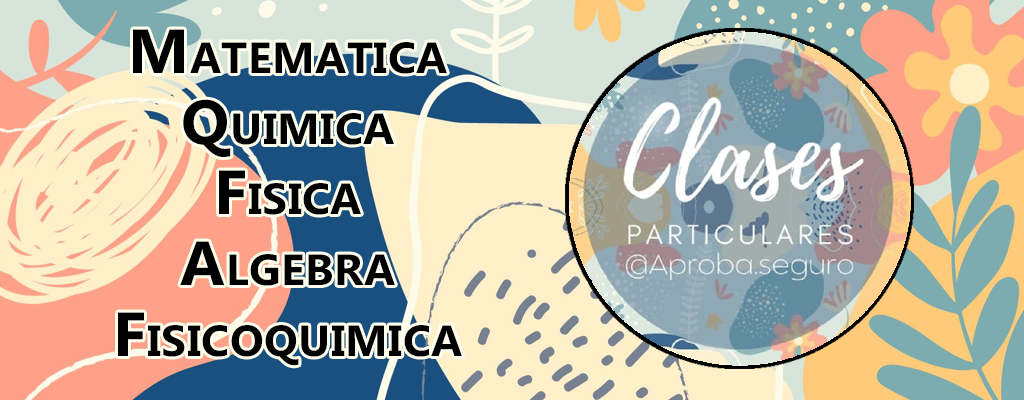
<style>
.page{position:relative;width:1024px;height:400px}
.page>*{position:absolute;margin:0}
.t1{font:106.3px/70.9px "Ebrima-Bold";letter-spacing:0.01em;color:#000000;font-variant:small-caps}
</style>
<div class="page">
<p class="t1" style="left:118px;top:29px;width:344px;height:337px;text-align:center">Matematica<br>Quimica<br>Fisica<br>Algebra<br>Fisicoquimica</p>
</div>
